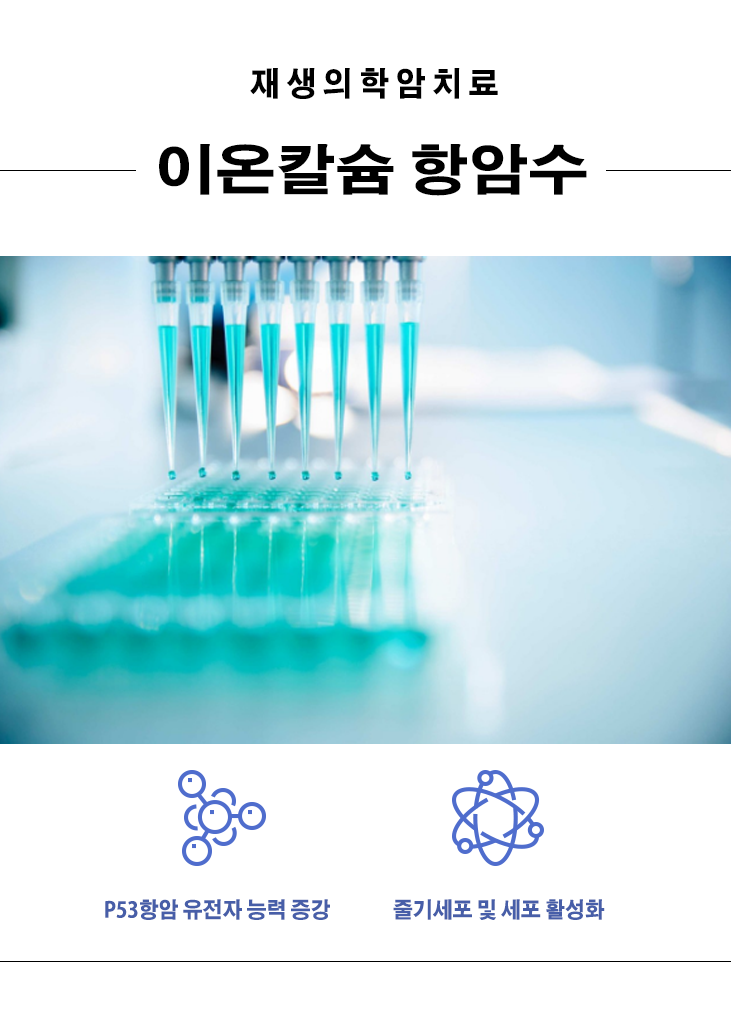
<style>
.page{position:relative;width:731px;height:1025px;background:#ffffff}
.page>*{position:absolute;margin:0}
.t1{font:32.6px "AdobeGothicStd-Bold";color:#000000;scale:0.92 1}
.t2{font:54px "AdobeGothicStd-Bold";color:#000000;scale:1.11 1}
.t3{font:21.6px "AdobeGothicStd-Bold";color:#475ea8;scale:0.92 1}
</style>
<div class="page">
<p class="t1" style="left:250px;top:68px;width:248px;height:31px">재 생 의 학 암 치 료</p>
<p class="t2" style="left:159px;top:144px;width:428px;height:52px">이온칼슘 항암수</p>
<p class="t3" style="left:105px;top:899px;width:225px;height:21px">P53항암 유전자 능력 증강</p>
<p class="t3" style="left:393px;top:899px;width:212px;height:21px">줄기세포 및 세포 활성화</p>
</div>
